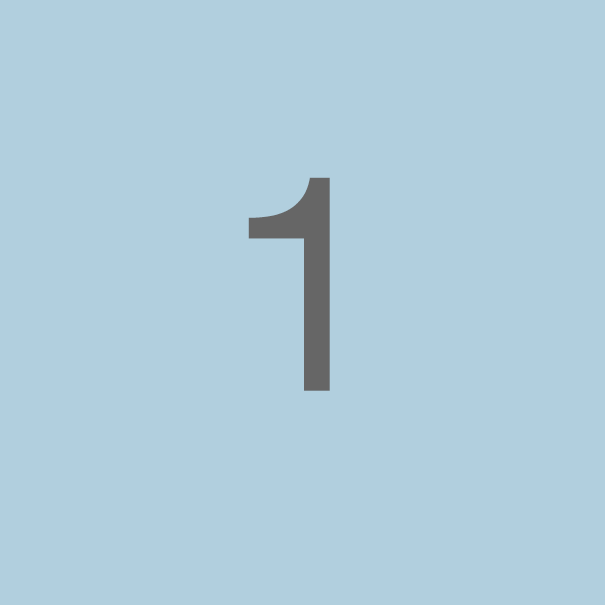
<style>
.page{position:relative;width:605px;height:605px;background:#b1cfde}
.page>*{position:absolute;margin:0}
.t1{font:300px "HelveticaNeue";color:#666666}
</style>
<div class="page">
<p class="t1" style="left:248px;top:177px;width:82px;height:214px">1</p>
</div>
